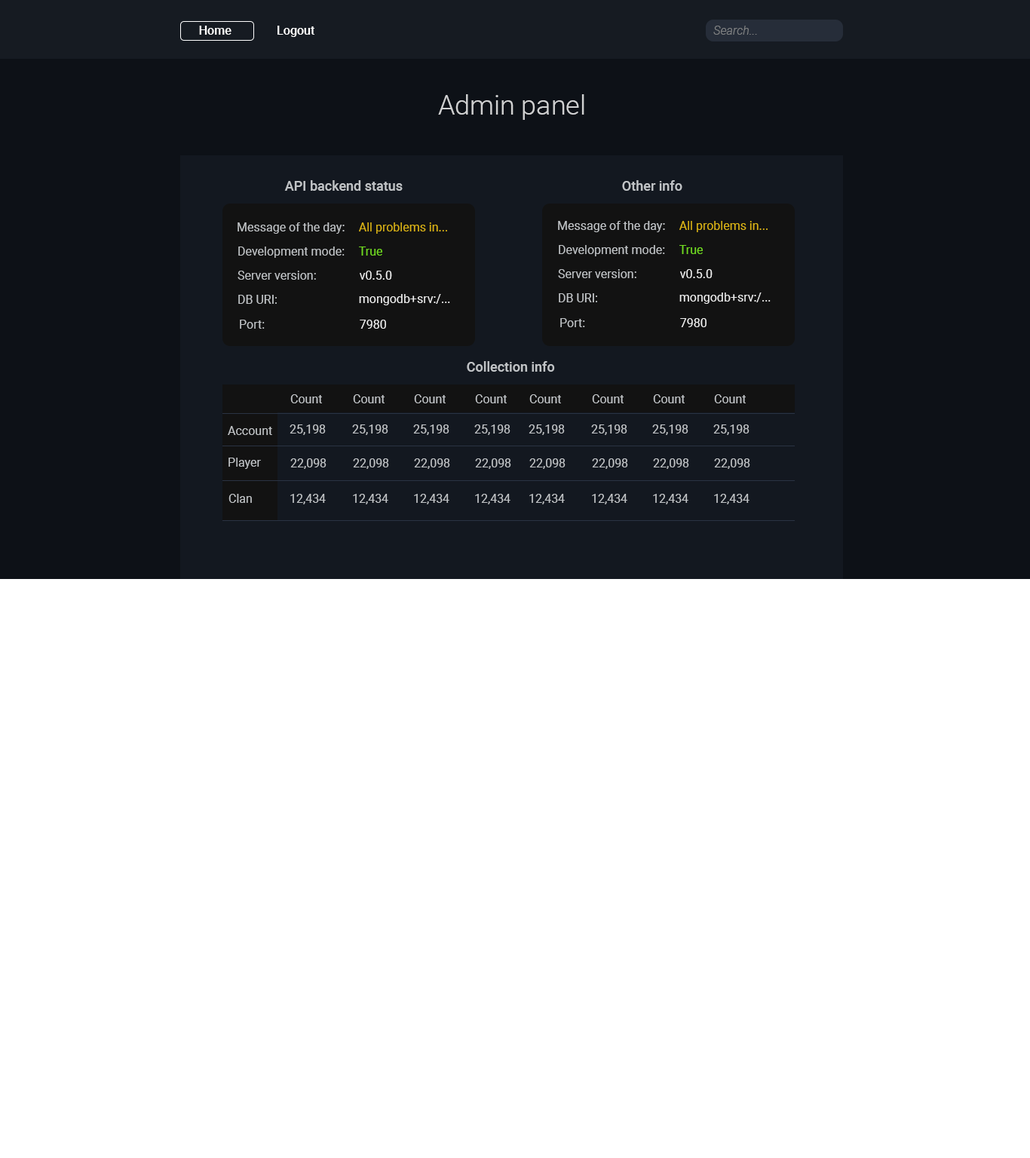
<style>
.page{position:relative;width:1030px;height:1158px;background:#ffffff}
.page>*{position:absolute;margin:0}
.t1{font:12.1px "Roboto-Medium";color:#ffffff}
.t2{font:12.1px "Roboto-LightItalic";color:#808283}
.t3{font:27.1px "Roboto-Light";color:#d0d1d2}
.t4{font:13.6px "Roboto-Medium";color:#c0c3c6}
.t5{font:12.1px "Roboto-Regular";color:#c0c3c6}
.t6{font:12.1px "Roboto-Regular";color:#dab315}
.t7{font:12.1px "Roboto-Regular";color:#71d921}
.t8{font:12.1px "Roboto-Regular";color:#ededed}
</style>
<div class="page">
<p class="t1" style="left:199px;top:26px;width:32px;height:9px">Home</p>
<p class="t1" style="left:277px;top:26px;width:37px;height:11px">Logout</p>
<p class="t2" style="left:713px;top:26px;width:44px;height:9px">Search...</p>
<p class="t3" style="left:438px;top:94px;width:146px;height:26px">Admin panel</p>
<p class="t4" style="left:284px;top:180px;width:119px;height:11px">API backend status</p>
<p class="t4" style="left:622px;top:180px;width:60px;height:11px">Other info</p>
<p class="t5" style="left:558px;top:221px;width:107px;height:11px">Message of the day:</p>
<p class="t6" style="left:679px;top:221px;width:88px;height:11px">All problems in...</p>
<p class="t5" style="left:237px;top:222px;width:108px;height:12px">Message of the day:</p>
<p class="t6" style="left:359px;top:222px;width:88px;height:12px">All problems in...</p>
<p class="t5" style="left:559px;top:245px;width:106px;height:11px">Development mode:</p>
<p class="t7" style="left:679px;top:245px;width:24px;height:9px">True</p>
<p class="t5" style="left:238px;top:247px;width:107px;height:11px">Development mode:</p>
<p class="t7" style="left:359px;top:247px;width:23px;height:9px">True</p>
<p class="t5" style="left:558px;top:269px;width:78px;height:9px">Server version:</p>
<p class="t8" style="left:680px;top:269px;width:32px;height:9px">v0.5.0</p>
<p class="t5" style="left:237px;top:271px;width:79px;height:9px">Server version:</p>
<p class="t8" style="left:360px;top:271px;width:32px;height:9px">v0.5.0</p>
<p class="t5" style="left:559px;top:293px;width:38px;height:9px">DB URI:</p>
<p class="t8" style="left:679px;top:293px;width:91px;height:11px">mongodb+srv:/...</p>
<p class="t5" style="left:238px;top:295px;width:39px;height:9px">DB URI:</p>
<p class="t8" style="left:359px;top:294px;width:91px;height:11px">mongodb+srv:/...</p>
<p class="t5" style="left:240px;top:320px;width:25px;height:9px">Port:</p>
<p class="t8" style="left:360px;top:320px;width:26px;height:9px">7980</p>
<p class="t5" style="left:560px;top:318px;width:25px;height:9px">Port:</p>
<p class="t8" style="left:680px;top:318px;width:26px;height:9px">7980</p>
<p class="t4" style="left:467px;top:361px;width:88px;height:11px">Collection info</p>
<p class="t5" style="left:290px;top:394px;width:32px;height:9px">Count</p>
<p class="t5" style="left:353px;top:394px;width:31px;height:9px">Count</p>
<p class="t5" style="left:414px;top:394px;width:32px;height:9px">Count</p>
<p class="t5" style="left:475px;top:394px;width:32px;height:9px">Count</p>
<p class="t5" style="left:529px;top:394px;width:32px;height:9px">Count</p>
<p class="t5" style="left:592px;top:394px;width:31px;height:9px">Count</p>
<p class="t5" style="left:653px;top:394px;width:32px;height:9px">Count</p>
<p class="t5" style="left:714px;top:394px;width:32px;height:9px">Count</p>
<p class="t5" style="left:228px;top:426px;width:44px;height:9px">Account</p>
<p class="t5" style="left:289px;top:424px;width:37px;height:11px">25,198</p>
<p class="t5" style="left:352px;top:424px;width:36px;height:11px">25,198</p>
<p class="t5" style="left:413px;top:424px;width:36px;height:11px">25,198</p>
<p class="t5" style="left:474px;top:424px;width:36px;height:11px">25,198</p>
<p class="t5" style="left:528px;top:424px;width:37px;height:11px">25,198</p>
<p class="t5" style="left:591px;top:424px;width:36px;height:11px">25,198</p>
<p class="t5" style="left:652px;top:424px;width:36px;height:11px">25,198</p>
<p class="t5" style="left:713px;top:424px;width:36px;height:11px">25,198</p>
<p class="t5" style="left:228px;top:458px;width:33px;height:11px">Player</p>
<p class="t5" style="left:290px;top:458px;width:36px;height:11px">22,098</p>
<p class="t5" style="left:353px;top:458px;width:36px;height:11px">22,098</p>
<p class="t5" style="left:414px;top:458px;width:36px;height:11px">22,098</p>
<p class="t5" style="left:475px;top:458px;width:36px;height:11px">22,098</p>
<p class="t5" style="left:529px;top:458px;width:36px;height:11px">22,098</p>
<p class="t5" style="left:592px;top:458px;width:36px;height:11px">22,098</p>
<p class="t5" style="left:653px;top:458px;width:36px;height:11px">22,098</p>
<p class="t5" style="left:714px;top:458px;width:36px;height:11px">22,098</p>
<p class="t5" style="left:228px;top:494px;width:24px;height:9px">Clan</p>
<p class="t5" style="left:290px;top:494px;width:36px;height:10px">12,434</p>
<p class="t5" style="left:353px;top:494px;width:35px;height:10px">12,434</p>
<p class="t5" style="left:414px;top:494px;width:35px;height:10px">12,434</p>
<p class="t5" style="left:475px;top:494px;width:35px;height:10px">12,434</p>
<p class="t5" style="left:529px;top:494px;width:36px;height:10px">12,434</p>
<p class="t5" style="left:592px;top:494px;width:35px;height:10px">12,434</p>
<p class="t5" style="left:653px;top:494px;width:35px;height:10px">12,434</p>
<p class="t5" style="left:714px;top:494px;width:35px;height:10px">12,434</p>
</div>
